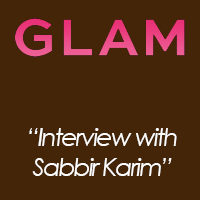
<style>
.page{position:relative;width:200px;height:200px;background:#452507}
.page>*{position:absolute;margin:0}
.t1{font:25px "CenturyGothic-Italic";letter-spacing:-0.075em;color:#ffffff}
</style>
<div class="page">
<p class="t1" style="left:29px;top:128px;width:148px;height:48px;text-align:center">“Interview with<br>Sabbir Karim”</p>
</div>
